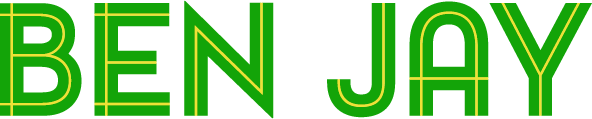
<style>
.page{position:relative;width:592px;height:119px;background:#ffffff}
.page>*{position:absolute;margin:0}
.t1{font:150px "PontiacInlineRegular";color:#13a408}
</style>
<div class="page">
<p class="t1" style="left:0px;top:0px;width:592px;height:119px">BEN JAY</p>
</div>
